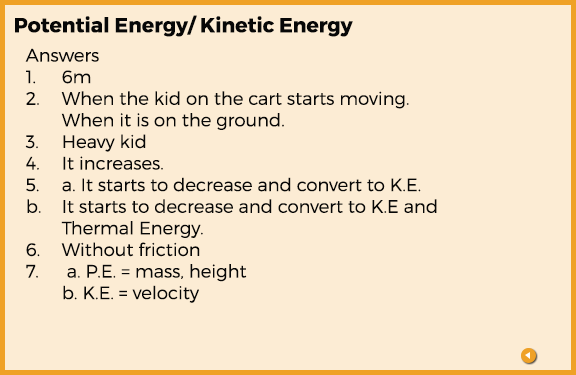
<style>
.page{position:relative;width:576px;height:375px;background:#fcecd4}
.page>*{position:absolute;margin:0}
.t1{font:20.4px "Montserrat-Bold";color:#070707}
.t2{font:18px "Montserrat-Light";color:#070707}
</style>
<div class="page">
<p class="t1" style="left:15px;top:15px;width:338px;height:22px">Potential Energy/ Kinetic Energy</p>
<p class="t2" style="left:25px;top:48px;width:412px;height:255px">Answers<br>1.  6m<br>2.  When the kid on the cart starts moving.<br> When it is on the ground.<br>3.  Heavy kid<br>4.  It increases.<br>5.  a. It starts to decrease and convert to K.E.<br>b.  It starts to decrease and convert to K.E and<br> Thermal Energy.<br>6.  Without friction<br>7.  a. P.E. = mass, height<br> b. K.E. = velocity</p>
</div>
